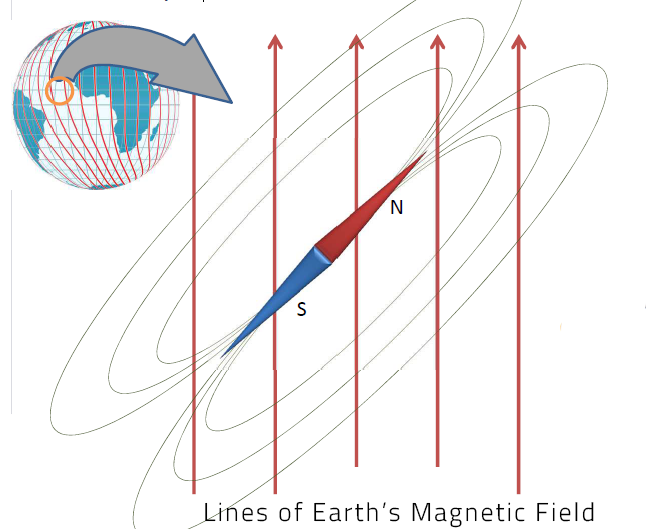
<style>
.page{position:relative;width:646px;height:529px;background:#ffffff}
.page>*{position:absolute;margin:0}
.t1{font:26px "TitilliumWeb-Light";letter-spacing:0.08em;color:#000000}
</style>
<div class="page">
<p class="t1" style="left:205px;top:501px;width:389px;height:27px">Lines of Earth’s Magnetic Field</p>
</div>
